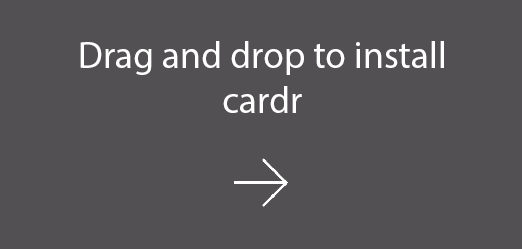
<style>
.page{position:relative;width:522px;height:249px;background:#525052}
.page>*{position:absolute;margin:0}
.t1{font:37.6px "MyriadPro-Regular";color:#ffffff}
</style>
<div class="page">
<p class="t1" style="left:80px;top:41px;width:364px;height:72px;text-align:center">Drag and drop to install<br>cardr</p>
</div>
